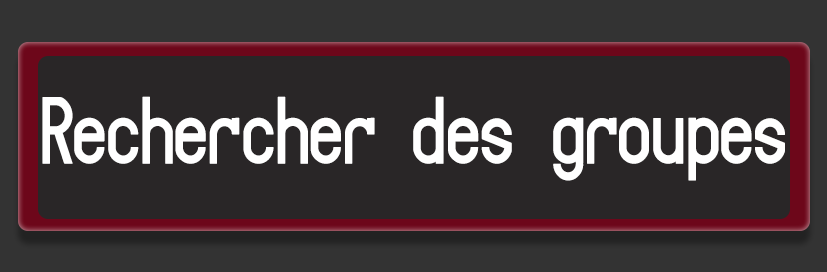
<style>
.page{position:relative;width:827px;height:272px;background:#292627}
.page>*{position:absolute;margin:0}
.t1{font:83.3px "Targa";color:#ffffff;scale:0.9 1}
</style>
<div class="page">
<p class="t1" style="left:42px;top:96px;width:743px;height:85px">Rechercher des groupes</p>
</div>
